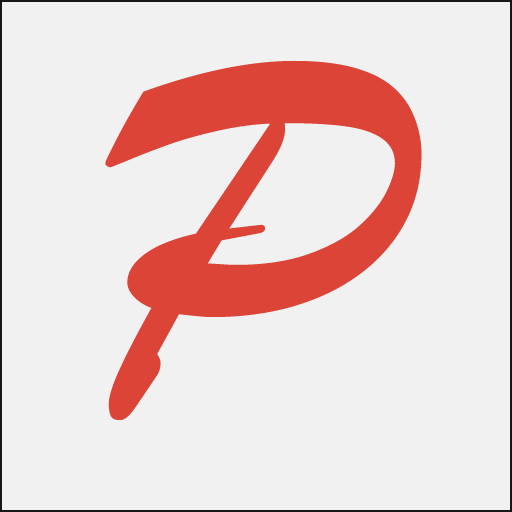
<style>
.page{position:relative;width:512px;height:512px;background:#f1f1f1}
.page>*{position:absolute;margin:0}
.t1{font:500px "BrushScriptMT";color:#dc4437}
</style>
<div class="page">
<p class="t1" style="left:105px;top:60px;width:317px;height:360px">P</p>
</div>
